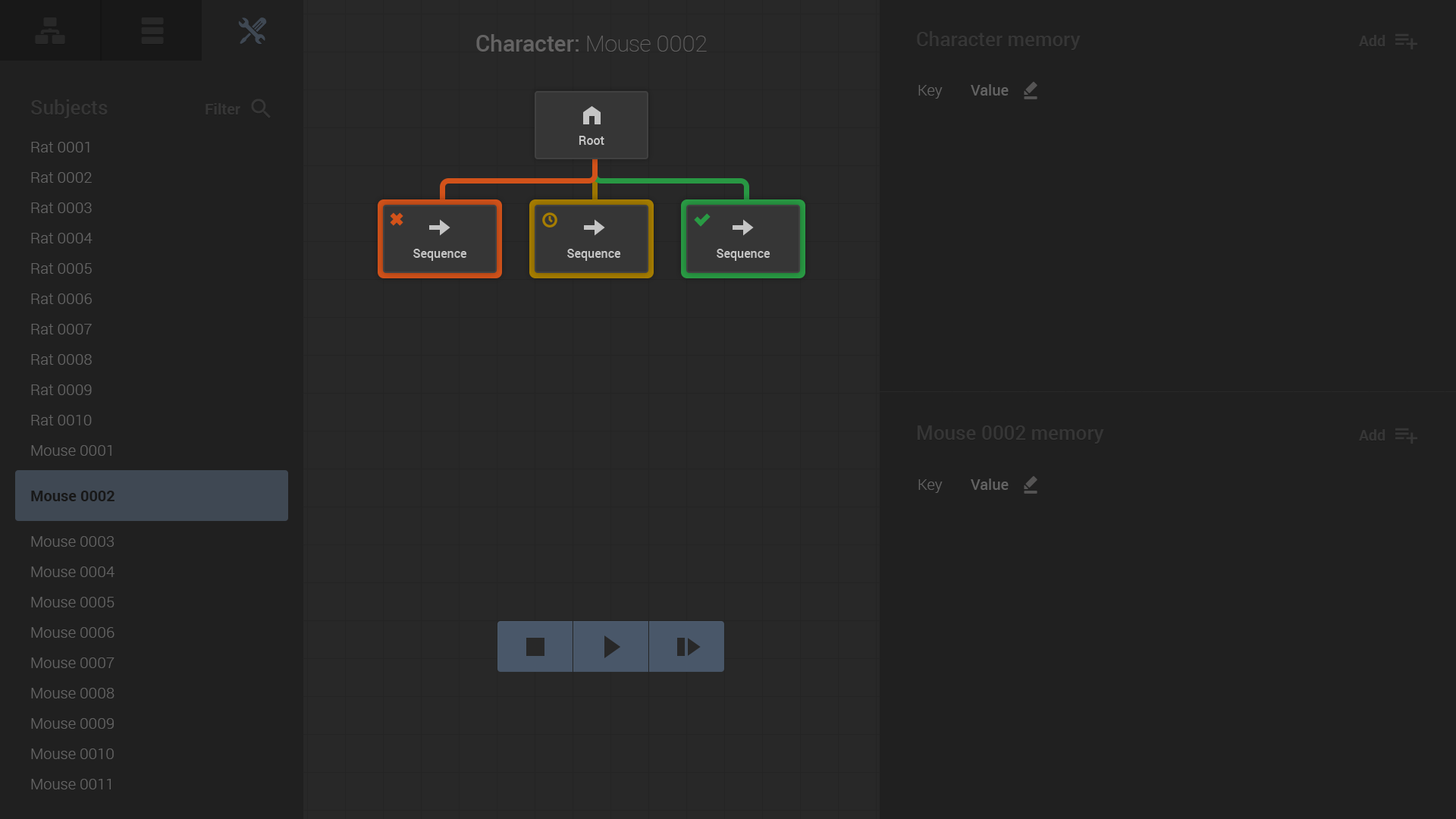
<style>
.page{position:relative;width:1456px;height:819px;background:#202020}
.page>*{position:absolute;margin:0}
.t1{font:22.7px "Roboto-Medium";color:#646363}
.t2{font:22.7px "Roboto-Thin";color:#646363}
.t3{font:19.7px "Roboto-Medium";color:#363636}
.t4{font:15.2px "Roboto-Bold";color:#363636}
.t5{font:15.2px "Roboto-Light";color:#636363}
.t6{font:15.2px "Roboto-Medium";color:#636363}
.t7{font:15.2px/30.3px "Roboto-Light";color:#636363}
.t8{font:15.2px/30.3px "Roboto-Bold";color:#181818}
</style>
<div class="page">
<p class="t1" style="left:476px;top:34px;width:231px;height:18px">Character:<span class="t2"> Mouse 0002</span></p>
<p class="t3" style="left:917px;top:31px;width:164px;height:19px">Character memory</p>
<p class="t4" style="left:1359px;top:35px;width:26px;height:11px">Add</p>
<p class="t5" style="left:918px;top:85px;width:25px;height:14px">Key</p>
<p class="t6" style="left:971px;top:84px;width:38px;height:12px">Value</p>
<p class="t3" style="left:31px;top:99px;width:77px;height:19px">Subjects</p>
<p class="t4" style="left:206px;top:103px;width:34px;height:12px">Filter</p>
<p class="t7" style="left:31px;top:142px;width:84px;height:647px">Rat 0001<br>Rat 0002<br>Rat 0003<br>Rat 0004<br>Rat 0005<br>Rat 0006<br>Rat 0007<br>Rat 0008<br>Rat 0009<br>Rat 0010<br>Mouse 0001<br><span class="t8">Mouse 0002<br></span>Mouse 0003<br>Mouse 0004<br>Mouse 0005<br>Mouse 0006<br>Mouse 0007<br>Mouse 0008<br>Mouse 0009<br>Mouse 0010<br>Mouse 0011</p>
<p class="t3" style="left:918px;top:425px;width:186px;height:19px">Mouse 0002 memory</p>
<p class="t4" style="left:1359px;top:429px;width:26px;height:12px">Add</p>
<p class="t5" style="left:918px;top:479px;width:25px;height:14px">Key</p>
<p class="t6" style="left:971px;top:479px;width:38px;height:11px">Value</p>
</div>
